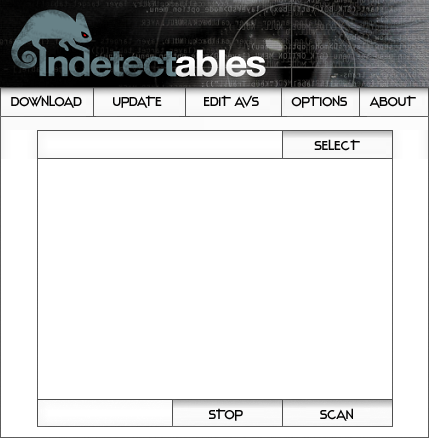
<style>
.page{position:relative;width:429px;height:438px;background:#ffffff}
.page>*{position:absolute;margin:0}
.t1{font:13.3px "Stentiga-Regular";color:#060505}
</style>
<div class="page">
<p class="t1" style="left:11px;top:95px;width:71px;height:13px">DOWNLOAD</p>
<p class="t1" style="left:113px;top:95px;width:49px;height:13px">UPDATE</p>
<p class="t1" style="left:204px;top:95px;width:55px;height:13px">EDIT AVS</p>
<p class="t1" style="left:291px;top:95px;width:56px;height:13px">OPTIONS</p>
<p class="t1" style="left:369px;top:95px;width:47px;height:13px">ABOUT</p>
<p class="t1" style="left:314px;top:139px;width:46px;height:12px">SELECT</p>
<p class="t1" style="left:209px;top:408px;width:34px;height:13px">STOP</p>
<p class="t1" style="left:320px;top:408px;width:33px;height:13px">SCAN</p>
</div>
